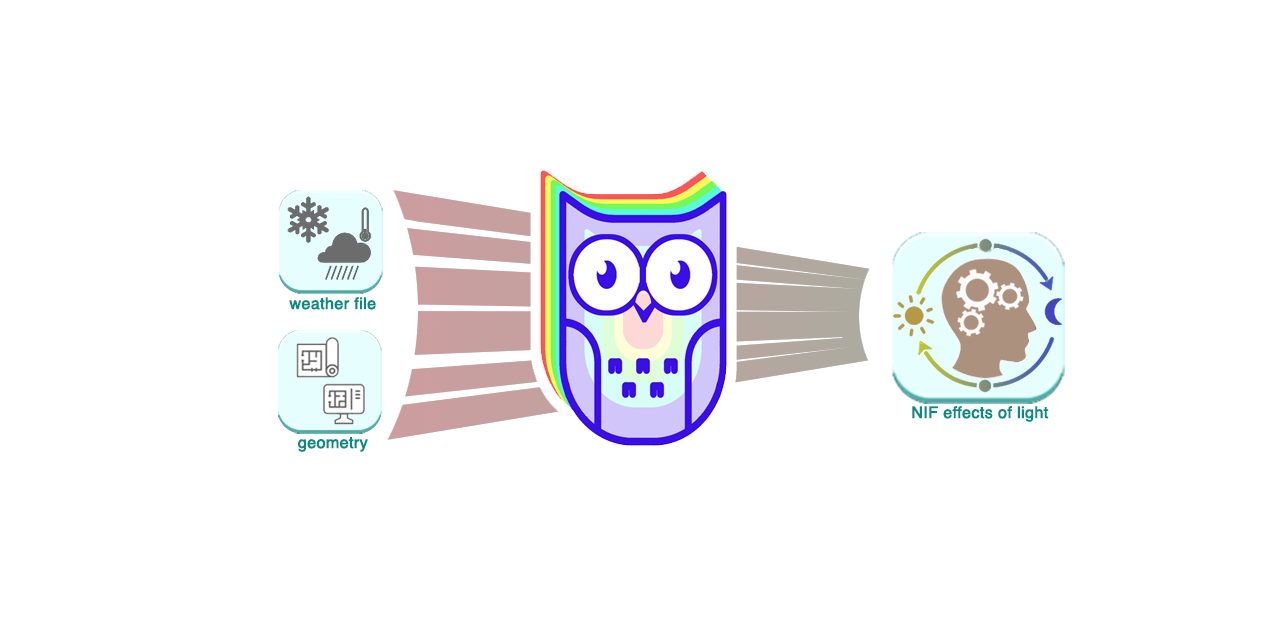
<style>
.page{position:relative;width:1280px;height:640px;background:#ffffff}
.page>*{position:absolute;margin:0}
.t1{font:16px "Helvetica";color:#058c87;font-weight:bold}
</style>
<div class="page">
<p class="t1" style="left:289px;top:297px;width:87px;height:13px">weather file</p>
<p class="t1" style="left:912px;top:406px;width:137px;height:16px">NIF effects of light</p>
<p class="t1" style="left:298px;top:437px;width:70px;height:15px">geometry</p>
</div>
